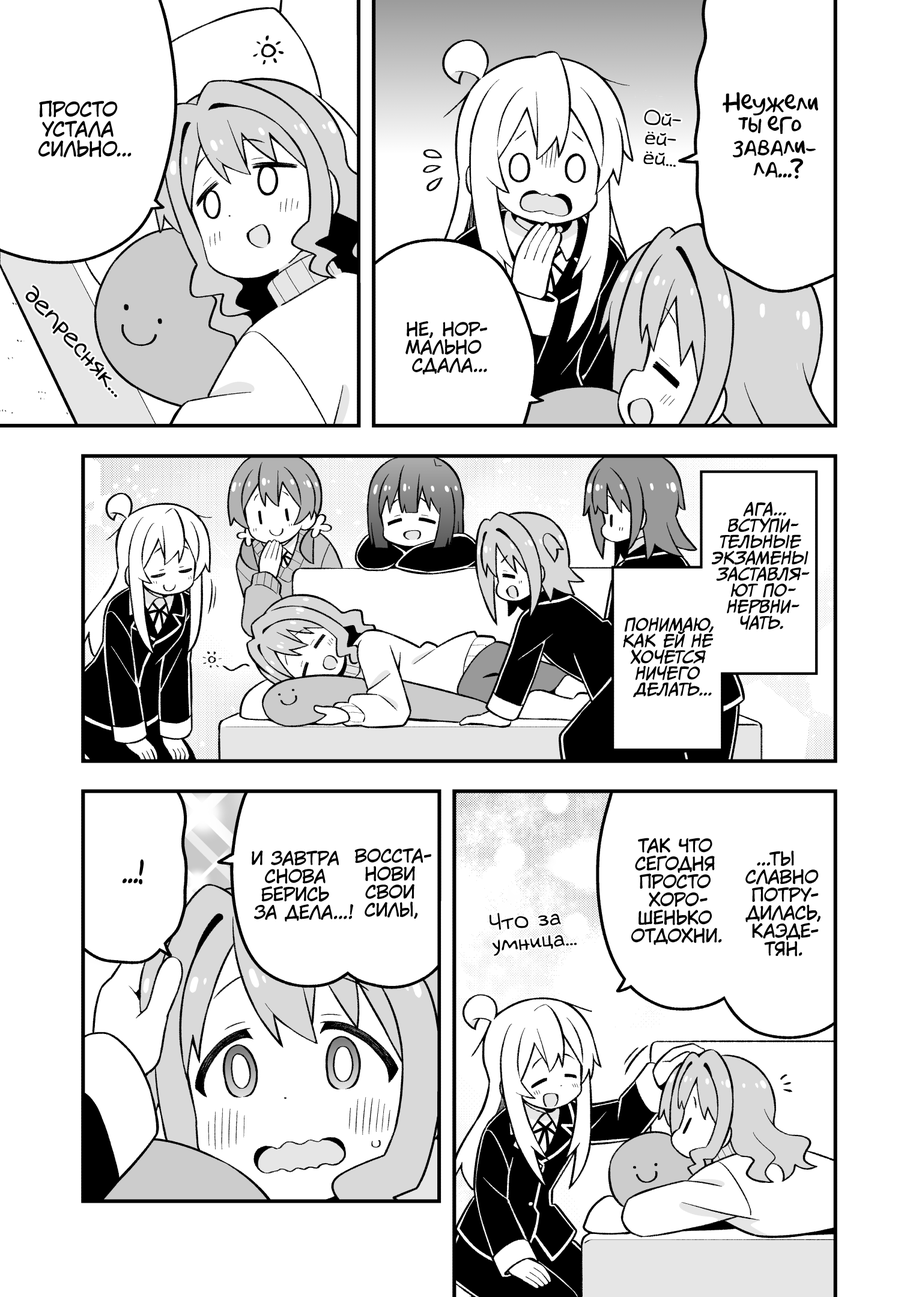
<style>
.page{position:relative;width:919px;height:1297px;background:#ffffff}
.page>*{position:absolute;margin:0}
.t1{font:19.8px "KuraiVoice2";color:#000000;text-transform:uppercase}
.t2{font:21.6px "AkbarPlain";color:#000000}
.t3{font:19.8px "v_Augie";color:#000000}
.t4{font:25.2px "v_Augie";color:#000000}
.t5{font:18px "KuraiVoice2";color:#000000;text-transform:uppercase}
.t6{font:16.2px "CCMeanwhile";color:#000000;text-transform:uppercase;font-style:italic}
.t7{font:25.2px "AkbarPlain";color:#000000}
.t8{font:21.6px "v_Augie";color:#000000}
</style>
<div class="page">
<p class="t1" style="left:38px;top:100px;width:94px;height:57px;text-align:center">Просто<br>устала<br>сильно...</p>
<p class="t2" style="left:723px;top:92px;width:95px;height:87px;text-align:center">Неужели<br>ты его<br>завали-<br>ла...?</p>
<p class="t3" style="left:643px;top:109px;width:38px;height:58px;text-align:center;rotate:5deg">Ой-<br>ёй-<br>ёй...</p>
<p class="t4" style="left:25px;top:285px;width:92px;height:113px;rotate:48deg">депресняк...</p>
<p class="t5" style="left:405px;top:321px;width:82px;height:54px;text-align:center">Не, нор-<br>мально<br>сдала...</p>
<p class="t6" style="left:712px;top:502px;width:98px;height:128px;text-align:center">Ага...<br>Вступи-<br>тельные<br>экзамены<br>заставля-<br>ют по-<br>нервни-<br>чать.</p>
<p class="t6" style="left:623px;top:617px;width:91px;height:80px;text-align:center">Понимаю,<br>как ей не<br>хочется<br>ничего<br>делать...</p>
<p class="t5" style="left:631px;top:838px;width:91px;height:107px;text-align:center">Так что<br>сегодня<br>просто<br>хоро-<br>шенько<br>отдохни.</p>
<p class="t5" style="left:252px;top:851px;width:101px;height:71px;text-align:center">И завтра<br>снова<br>берись<br>за дела...!</p>
<p class="t5" style="left:354px;top:848px;width:77px;height:71px;text-align:center">Восста-<br>нови<br>свои<br>силы,</p>
<p class="t5" style="left:745px;top:851px;width:76px;height:106px;text-align:center">...Ты<br>славно<br>потру-<br>дилась,<br>Каэде-<br>тян.</p>
<p class="t7" style="left:123px;top:860px;width:21px;height:25px">...!</p>
<p class="t8" style="left:490px;top:913px;width:87px;height:43px;text-align:center;rotate:-5deg">Что за<br>умница...</p>
</div>
